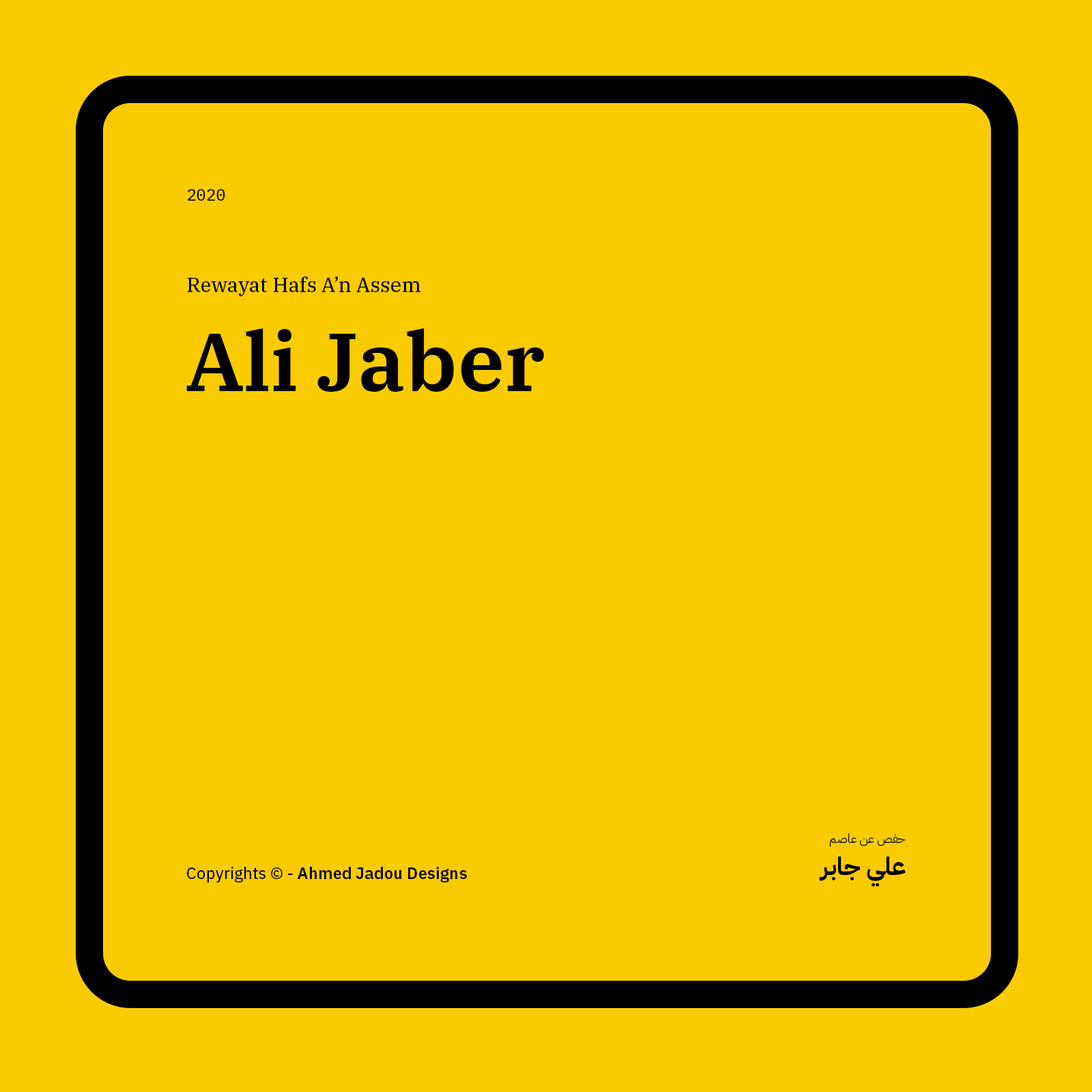
<style>
.page{position:relative;width:1092px;height:1092px;background:#facb00}
.page>*{position:absolute;margin:0}
.t1{font:16.4px "IBMPlexMono-Text";color:#000000}
.t2{font:20.5px "IBMPlexSerif-Text";color:#000000}
.t3{font:81.9px "IBMPlexSerif-SemiBold";color:#000000}
.t4{font:12.3px "IBMPlexArabic-Light";color:#000000}
.t5{font:24.6px "IBMPlexArabic-Bold";color:#000000}
.t6{font:16.4px "IBMPlexSans-SemiBold";color:#000000}
.t7{font:16.4px "IBMPlexSans-Text";color:#000000}
</style>
<div class="page">
<p class="t1" style="left:188px;top:189px;width:37px;height:12px">2020</p>
<p class="t2" style="left:187px;top:276px;width:233px;height:20px">Rewayat Hafs A’n Assem</p>
<p class="t3" style="left:186px;top:328px;width:358px;height:64px">Ali Jaber</p>
<p class="t4" style="left:830px;top:833px;width:76px;height:14px">حفص عن عاصم</p>
<p class="t5" style="left:819px;top:857px;width:87px;height:30px">علي جابر</p>
<p class="t6" style="left:187px;top:867px;width:280px;height:15px"><span class="t7">Copyrights © - </span>Ahmed Jadou Designs</p>
</div>
